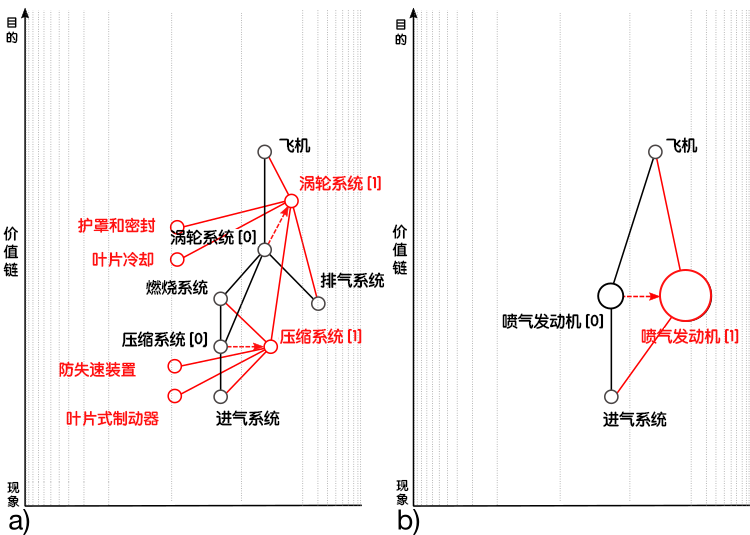
<style>
.page{position:relative;width:750px;height:535px;background:#ffffff}
.page>*{position:absolute;margin:0}
.t1{font:12.2px "STYuanti-SC-Bold";color:#000000}
.t2{font:16px "STYuanti-SC-Bold";color:#000000}
.t3{font:16px "STYuanti-SC-Bold";color:#ff1111}
.t4{font:15.6px "STYuanti-SC-Bold";color:#ff1111}
.t5{font:14.7px "STYuanti-SC-Bold";color:#000000}
.t6{font:15.6px "STYuanti-SC-Bold";color:#000000}
</style>
<div class="page">
<p class="t1" style="left:6px;top:17px;width:12px;height:27px">目<br>的</p>
<p class="t1" style="left:395px;top:19px;width:12px;height:27px">目<br>的</p>
<p class="t2" style="left:279px;top:137px;width:32px;height:16px">飞机</p>
<p class="t2" style="left:666px;top:137px;width:32px;height:16px">飞机</p>
<p class="t3" style="left:299px;top:175px;width:82px;height:16px">涡轮系统 [1]</p>
<p class="t4" style="left:78px;top:217px;width:78px;height:16px">护罩和密封</p>
<p class="t5" style="left:3px;top:226px;width:16px;height:51px">价<br>值<br>链</p>
<p class="t2" style="left:170px;top:229px;width:86px;height:16px">涡轮系统 [0]</p>
<p class="t5" style="left:392px;top:224px;width:16px;height:51px">价<br>值<br>链</p>
<p class="t4" style="left:92px;top:251px;width:62px;height:16px">叶片冷却</p>
<p class="t6" style="left:146px;top:279px;width:62px;height:16px">燃烧系统</p>
<p class="t2" style="left:320px;top:272px;width:65px;height:17px">排气系统</p>
<p class="t2" style="left:502px;top:313px;width:102px;height:16px">喷气发动机 [0]</p>
<p class="t3" style="left:280px;top:328px;width:82px;height:16px">压缩系统 [1]</p>
<p class="t3" style="left:641px;top:328px;width:98px;height:16px">喷气发动机 [1]</p>
<p class="t2" style="left:122px;top:331px;width:86px;height:16px">压缩系统 [0]</p>
<p class="t4" style="left:59px;top:361px;width:77px;height:16px">防失速装置</p>
<p class="t4" style="left:66px;top:410px;width:93px;height:16px">叶片式制动器</p>
<p class="t2" style="left:216px;top:410px;width:64px;height:16px">进气系统</p>
<p class="t2" style="left:603px;top:411px;width:64px;height:16px">进气系统</p>
<p class="t1" style="left:7px;top:481px;width:13px;height:27px">现<br>象</p>
<p class="t1" style="left:396px;top:479px;width:13px;height:27px">现<br>象</p>
</div>
